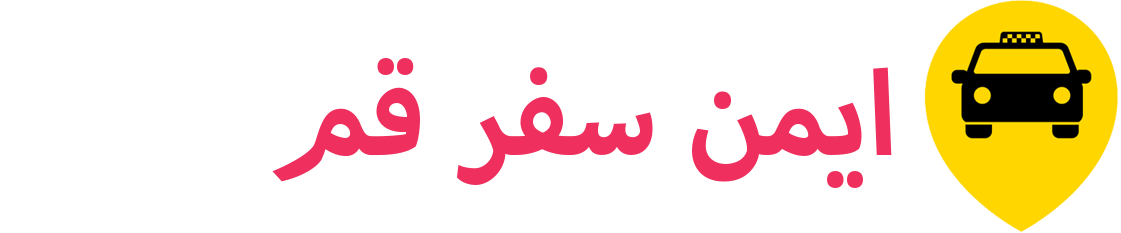
<style>
.page{position:relative;width:1121px;height:233px;background:#ffffff}
.page>*{position:absolute;margin:0}
.t1{font:166.7px "MyriadArabic-Bold";color:#ef305e}
</style>
<div class="page">
<p class="t1" style="left:272px;top:58px;width:620px;height:130px">ایمن سفر قم</p>
</div>
